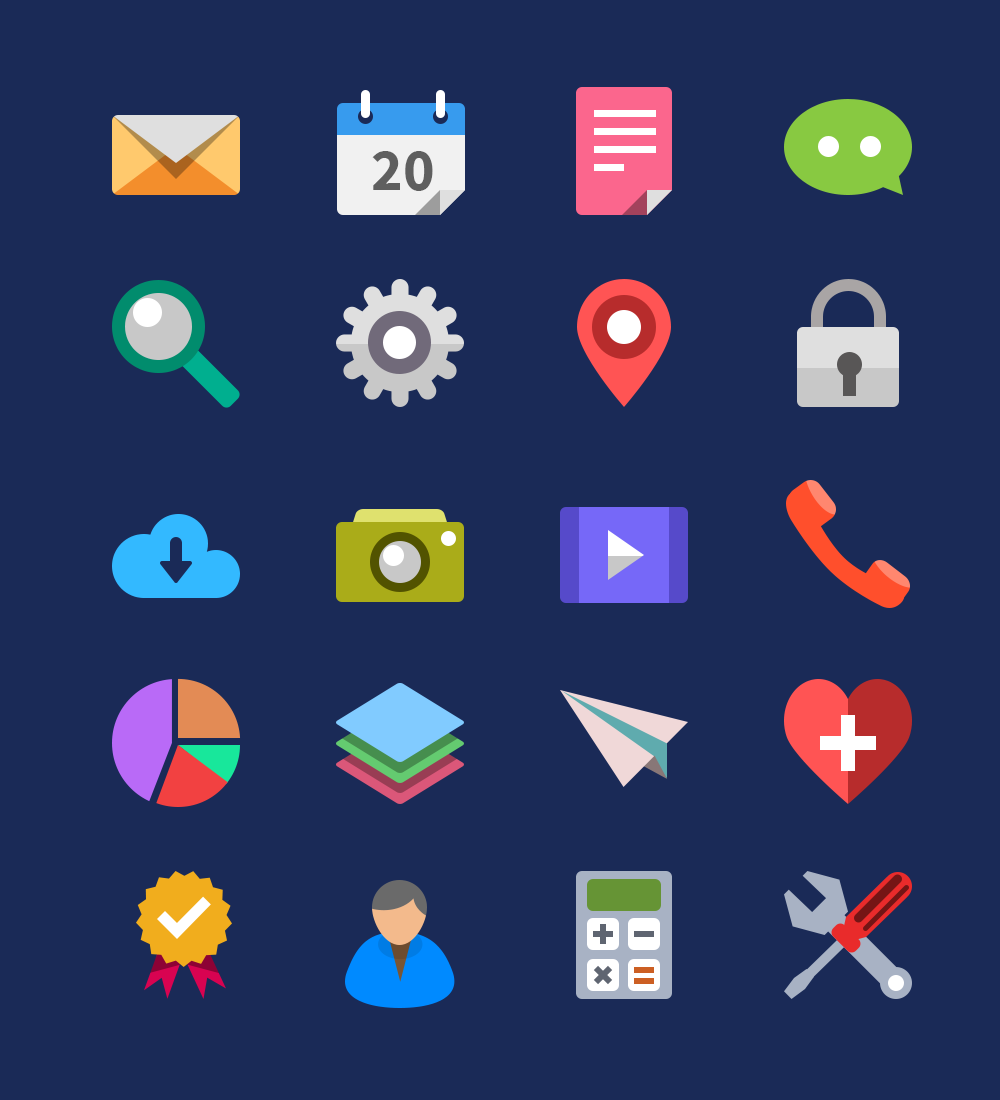
<style>
.page{position:relative;width:1000px;height:1100px;background:#1a2a57}
.page>*{position:absolute;margin:0}
.t1{font:60px "SourceSansPro-Bold";color:#5f5f5f}
</style>
<div class="page">
<p class="t1" style="left:372px;top:151px;width:61px;height:40px">20</p>
</div>
